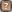
<style>
.page{position:relative;width:12px;height:12px}
.page>*{position:absolute;margin:0}
.t1{font:8px "ArialMT";color:#ffffff}
</style>
<div class="page">
<p class="t1" style="left:4px;top:3px;width:4px;height:6px">?</p>
</div>
